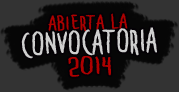
<style>
.page{position:relative;width:179px;height:92px;background:#333333}
.page>*{position:absolute;margin:0}
.t1{font:27px/25px "Penakut";letter-spacing:-0.02em;color:#cfcfcf;font-weight:bold}
.t2{font:16.4px/29px "Penakut";letter-spacing:-0.02em;color:#ad0000;font-weight:bold;scale:1.22 1}
.t3{font:16.4px/30px "Penakut";letter-spacing:-0.02em;color:#ad0000;font-weight:bold;scale:1.22 1}
.t4{font:21px/21px "Penakut";letter-spacing:-0.02em;color:#ad0000;font-weight:bold;scale:1.43 1}
</style>
<div class="page">
<p class="t1" style="left:21px;top:13px;width:136px;height:64px;text-align:center;rotate:-2deg"><span class="t2">a</span><span class="t3">bierta la<br></span>CONVOCATORIA<br><span class="t4">2014</span></p>
</div>
